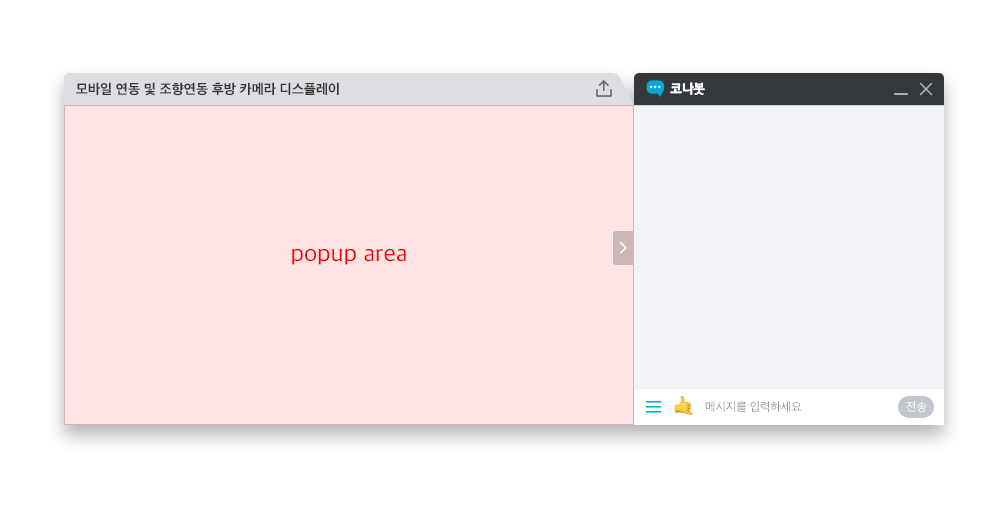
<style>
.page{position:relative;width:1000px;height:527px;background:#ffffff}
.page>*{position:absolute;margin:0}
.t1{font:14px "AppleSDGothicNeo-Bold";color:#333333}
.t2{font:24px "AppleSDGothicNeo-Regular";color:#ff0000}
.t3{font:12px "AppleSDGothicNeo-Regular";color:#999999}
.t4{font:12px "AppleSDGothicNeo-Regular";color:#ffffff}
</style>
<div class="page">
<p class="t1" style="left:76px;top:82px;width:263px;height:14px">모바일 연동 및 조향연동 후방 카메라 디스플레이</p>
<p class="t2" style="left:292px;top:248px;width:114px;height:17px">popup area</p>
<p class="t3" style="left:705px;top:401px;width:97px;height:11px">메시지를 입력하세요</p>
<p class="t4" style="left:906px;top:401px;width:21px;height:11px">전송</p>
</div>
